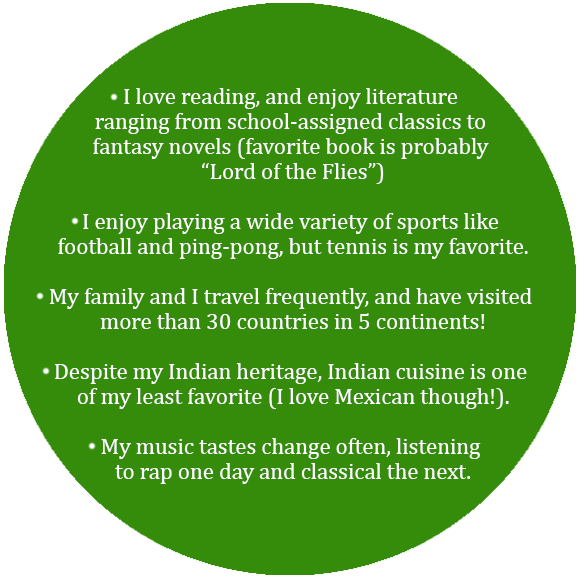
<style>
.page{position:relative;width:580px;height:580px;background:#358c0b}
.page>*{position:absolute;margin:0}
.t1{font:22.9px/25px "Cambria";color:#fdfdfd}
</style>
<div class="page">
<p class="t1" style="left:49px;top:88px;width:483px;height:396px;text-align:center">I love reading, and enjoy literature <br>ranging from school-assigned classics to <br>fantasy novels (favorite book is probably <br>“Lord of the Flies”)<br><br>I enjoy playing a wide variety of sports like <br>football and ping-pong, but tennis is my favorite.<br><br>My family and I travel frequently, and have visited <br>more than 30 countries in 5 continents!<br><br>Despite my Indian heritage, Indian cuisine is one <br>of my least favorite (I love Mexican though!).<br><br>My music tastes change often, listening <br>to rap one day and classical the next.</p>
</div>
